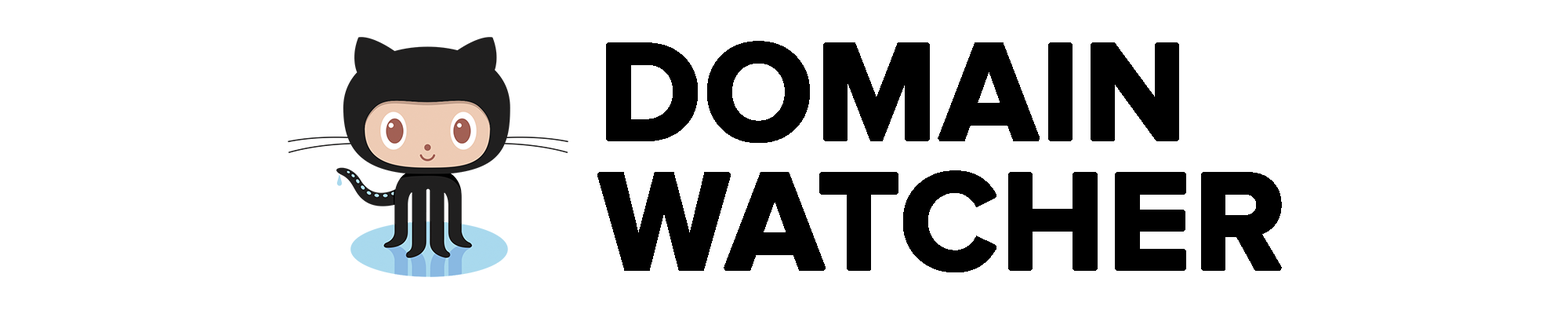
<style>
.page{position:relative;width:1568px;height:314px;background:#ffffff}
.page>*{position:absolute;margin:0}
.t1{font:141.1px/129.4px "ProximaNova-Bold";color:#000000;font-weight:bold}
</style>
<div class="page">
<p class="t1" style="left:597px;top:41px;width:685px;height:231px">DOMAIN<br>WATCHER</p>
</div>
